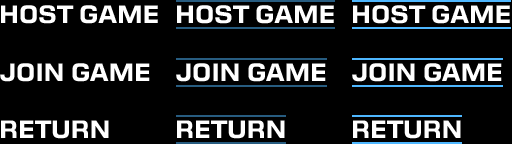
<style>
.page{position:relative;width:512px;height:144px;background:#000000}
.page>*{position:absolute;margin:0}
.t1{font:24px "Moire-Bold";color:#ffffff}
</style>
<div class="page">
<p class="t1" style="left:0px;top:5px;width:158px;height:134px">HOST GAME<br><br>JOIN GAME<br><br>RETURN</p>
<p class="t1" style="left:176px;top:5px;width:158px;height:134px">HOST GAME<br><br>JOIN GAME<br><br>RETURN</p>
<p class="t1" style="left:352px;top:5px;width:158px;height:134px">HOST GAME<br><br>JOIN GAME<br><br>RETURN</p>
</div>
